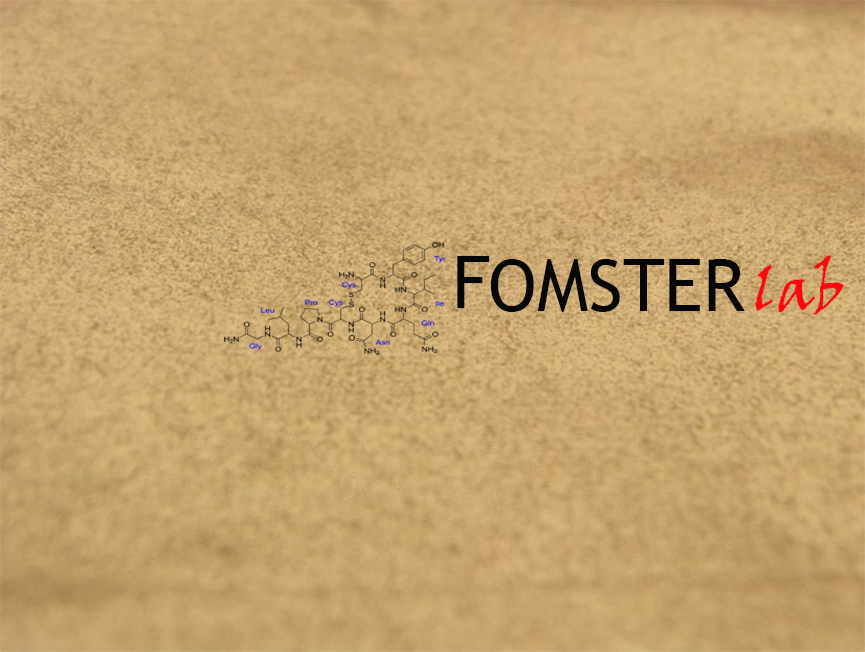
<style>
.page{position:relative;width:865px;height:652px}
.page>*{position:absolute;margin:0}
.t1{font:72px "TrebuchetMS";color:#070707}
.t2{font:60px "VinerHandITC";color:#fa0a0f}
</style>
<div class="page">
<p class="t1" style="left:457px;top:256px;width:33px;height:52px">F</p>
<p class="t2" style="left:755px;top:255px;width:89px;height:60px">lab</p>
<p class="t1" style="left:490px;top:259px;width:255px;height:53px">OMSTER</p>
</div>
